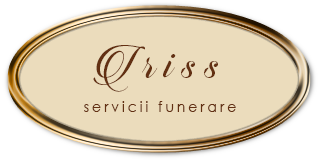
<style>
.page{position:relative;width:318px;height:160px;background:#ebdcbc}
.page>*{position:absolute;margin:0}
.t1{font:52.8px "CandlescriptDemoVersion";letter-spacing:0.21em;color:#633012;scale:0.91 1}
.t2{font:15.4px "CenturyGothic";letter-spacing:0.21em;color:#633012;scale:0.91 1}
</style>
<div class="page">
<p class="t1" style="left:93px;top:45px;width:125px;height:47px">Iriss</p>
<p class="t2" style="left:84px;top:101px;width:152px;height:11px">servicii funerare</p>
</div>
